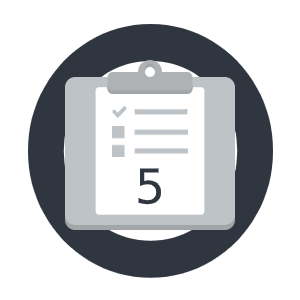
<style>
.page{position:relative;width:300px;height:300px;background:#ffffff}
.page>*{position:absolute;margin:0}
.t1{font:48px "DejaVuSans";color:#2f3640}
</style>
<div class="page">
<p class="t1" style="left:138px;top:168px;width:24px;height:37px">5</p>
</div>
